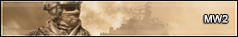
<style>
.page{position:relative;width:238px;height:37px}
.page>*{position:absolute;margin:0}
.t1{font:10px "ArialMT";color:#ffffff;font-weight:bold}
</style>
<div class="page">
<p class="t1" style="left:204px;top:15px;width:24px;height:8px">MW2</p>
</div>
